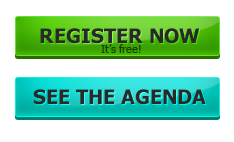
<style>
.page{position:relative;width:234px;height:142px;background:#ffffff}
.page>*{position:absolute;margin:0}
.t1{font:20px "Tahoma-Bold";color:#292929;text-transform:uppercase}
.t2{font:11px "Tahoma";color:#163e00}
</style>
<div class="page">
<p class="t1" style="left:40px;top:28px;width:160px;height:16px">Register Now</p>
<p class="t2" style="left:101px;top:44px;width:40px;height:9px">It’s free!</p>
<p class="t1" style="left:33px;top:89px;width:173px;height:16px">See the agenda</p>
</div>
